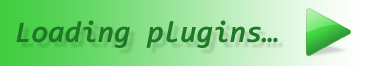
<style>
.page{position:relative;width:366px;height:66px}
.page>*{position:absolute;margin:0}
.t1{font:30px "Consolas-BoldItalic";color:#1f7826}
</style>
<div class="page">
<p class="t1" style="left:16px;top:20px;width:262px;height:28px">Loading plugins...</p>
</div>
